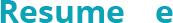
<style>
.page{position:relative;width:173px;height:23px;background:#ffffff}
.page>*{position:absolute;margin:0}
.t1{font:32px "OpenSans-Bold";color:#0ca3b9}
.t2{font:32px "OpenSans-Bold";color:#ffffff}
</style>
<div class="page">
<p class="t1" style="left:0px;top:0px;width:173px;height:23px">Resume<span class="t2">M</span>e</p>
</div>
